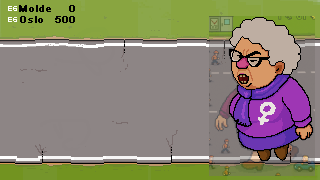
<style>
.page{position:relative;width:320px;height:180px;background:#8d8585}
.page>*{position:absolute;margin:0}
.t1{font:9.5px "ArialMT";letter-spacing:0.14em;color:#000000;font-weight:bold}
</style>
<div class="page">
<p class="t1" style="left:19px;top:5px;width:32px;height:7px">Molde</p>
<p class="t1" style="left:69px;top:5px;width:6px;height:7px">0</p>
<p class="t1" style="left:20px;top:16px;width:23px;height:7px">Oslo</p>
<p class="t1" style="left:55px;top:16px;width:20px;height:7px">500</p>
</div>
